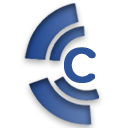
<style>
.page{position:relative;width:128px;height:128px;background:#ffffff}
.page>*{position:absolute;margin:0}
.t1{font:62.9px "Comfortaa-Bold";color:#2e5396;font-weight:bold}
</style>
<div class="page">
<p class="t1" style="left:64px;top:47px;width:32px;height:36px">c</p>
</div>
